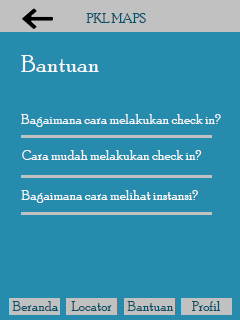
<style>
.page{position:relative;width:240px;height:320px;background:#268bac}
.page>*{position:absolute;margin:0}
.t1{font:14px "PoorRichard-Regular";color:#0b5064}
.t2{font:24px "PoorRichard-Regular";color:#f4f7f8}
.t3{font:14px "PoorRichard-Regular";color:#f1f6f8}
.t4{font:14px "PoorRichard-Regular";color:#f5f8f9}
.t5{font:14px "PoorRichard-Regular";color:#f5f9fa}
</style>
<div class="page">
<p class="t1" style="left:86px;top:13px;width:60px;height:10px">PKL MAPS</p>
<p class="t2" style="left:21px;top:55px;width:78px;height:17px">Bantuan</p>
<p class="t3" style="left:21px;top:114px;width:200px;height:13px">Bagaimana cara melakukan check in?</p>
<p class="t4" style="left:22px;top:150px;width:180px;height:10px">Cara mudah melakukan check in?</p>
<p class="t5" style="left:21px;top:190px;width:177px;height:13px">Bagaimana cara melihat instansi?</p>
<p class="t1" style="left:12px;top:301px;width:46px;height:10px">Beranda</p>
<p class="t1" style="left:71px;top:301px;width:41px;height:10px">Locator</p>
<p class="t1" style="left:127px;top:301px;width:46px;height:10px">Bantuan</p>
<p class="t1" style="left:192px;top:301px;width:29px;height:10px">Profil</p>
</div>
